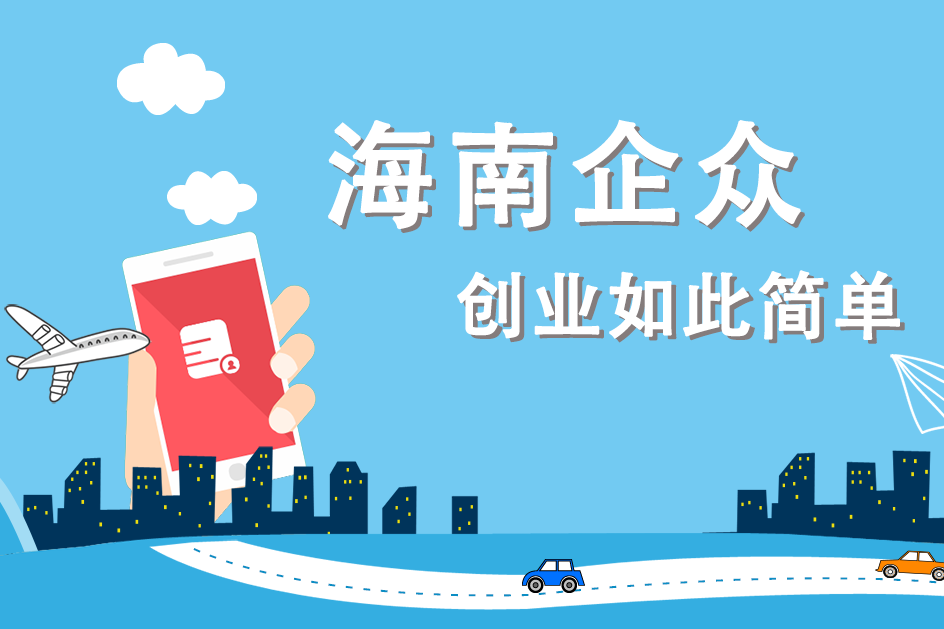
<style>
.page{position:relative;width:944px;height:629px;background:#72caf2}
.page>*{position:absolute;margin:0}
.t1{font:113px "AdobeHeitiStd-Regular";letter-spacing:0.06em;color:#ffffff;font-weight:bold}
.t2{font:113px "AdobeHeitiStd-Regular";letter-spacing:0.06em;font-weight:bold}
.t3{font:72px "AdobeHeitiStd-Regular";letter-spacing:0.02em;color:#ffffff;font-weight:bold}
.t4{font:72px "AdobeHeitiStd-Regular";letter-spacing:0.02em;font-weight:bold}
</style>
<div class="page">
<p class="t1" style="left:328px;top:119px;width:473px;height:111px">海南企众</p>
<p class="t2" style="left:332px;top:123px;width:473px;height:110px">海南企众</p>
<p class="t3" style="left:457px;top:270px;width:443px;height:70px">创业如此简单</p>
<p class="t4" style="left:461px;top:274px;width:444px;height:70px">创业如此简单</p>
</div>
